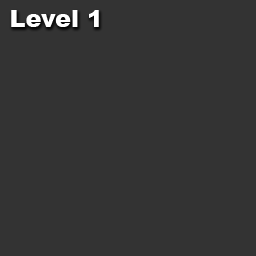
<style>
.page{position:relative;width:256px;height:256px;background:#333333}
.page>*{position:absolute;margin:0}
.t1{font:24px "Arial-Black";color:#ffffff}
</style>
<div class="page">
<p class="t1" style="left:11px;top:10px;width:88px;height:17px">Level 1</p>
</div>
